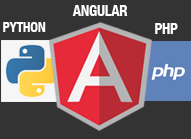
<style>
.page{position:relative;width:191px;height:139px;background:#333333}
.page>*{position:absolute;margin:0}
.t1{font:15px "HelveticaNeue-CondensedBold";letter-spacing:-0.025em;color:#ffffff}
.t2{font:14px "HelveticaNeue-CondensedBold";letter-spacing:-0.025em;color:#ffffff}
</style>
<div class="page">
<p class="t1" style="left:72px;top:5px;width:56px;height:11px">ANGULAR</p>
<p class="t2" style="left:3px;top:22px;width:43px;height:10px">PYTHON</p>
<p class="t1" style="left:155px;top:23px;width:23px;height:11px">PHP</p>
</div>
